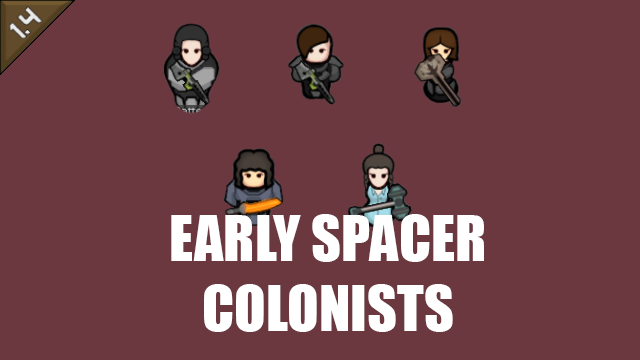
<style>
.page{position:relative;width:640px;height:360px;background:#6c3840}
.page>*{position:absolute;margin:0}
.t1{font:58.3px "Impact";color:#ffffff}
</style>
<div class="page">
<p class="t1" style="left:171px;top:214px;width:313px;height:118px;text-align:center">EARLY SPACER<br>COLONISTS</p>
</div>
